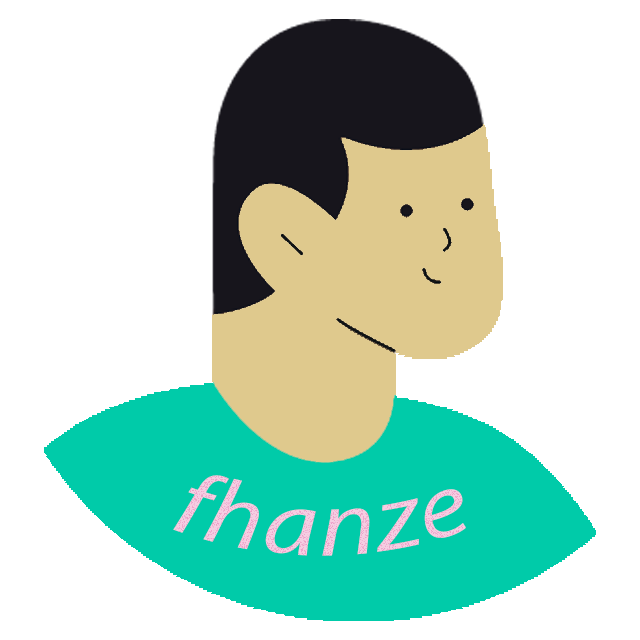
<style>
.page{position:relative;width:640px;height:640px;background:#ffffff}
.page>*{position:absolute;margin:0}
.t1{font:92.3px "MyriadPro-It"}
</style>
<div class="page">
<p class="t1" style="left:173px;top:475px;width:293px;height:81px">fhanze</p>
</div>
